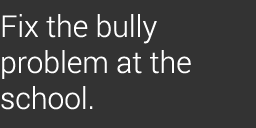
<style>
.page{position:relative;width:256px;height:128px;background:#333333}
.page>*{position:absolute;margin:0}
.t1{font:30px "Roboto-Light";color:#ffffff}
</style>
<div class="page">
<p class="t1" style="left:1px;top:14px;width:190px;height:96px">Fix the bully <br>problem at the school.</p>
</div>
